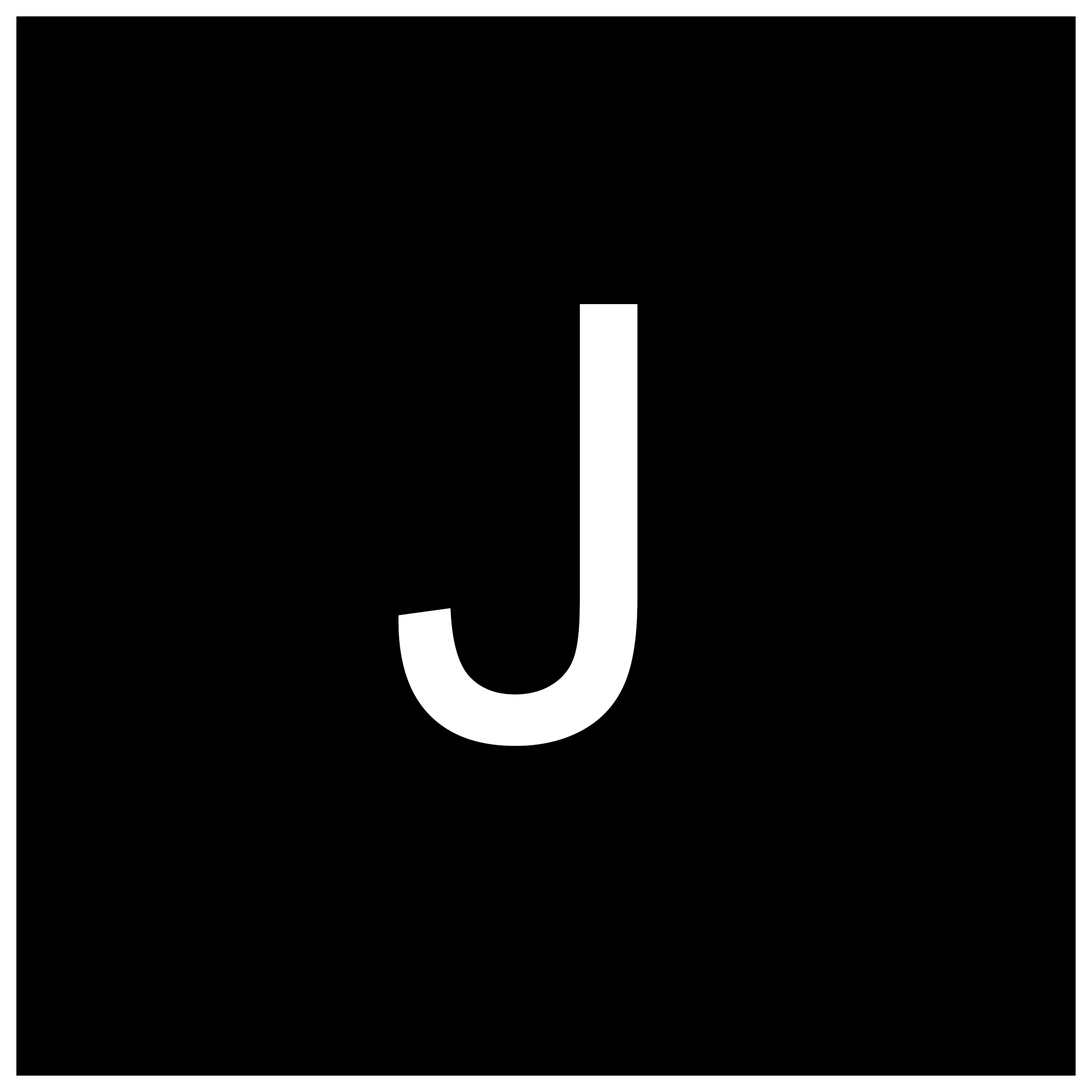
<style>
.page{position:relative;width:1092px;height:1092px;background:#000000}
.page>*{position:absolute;margin:0}
.t1{font:606.7px "ArialMT";color:#ffffff}
</style>
<div class="page">
<p class="t1" style="left:398px;top:304px;width:240px;height:442px">J</p>
</div>
